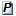
<style>
.page{position:relative;width:16px;height:16px;background:#ffffff}
.page>*{position:absolute;margin:0}
.t1{font:12px "Arial-BoldItalicMT";color:#000000}
</style>
<div class="page">
<p class="t1" style="left:3px;top:3px;width:9px;height:9px">P</p>
</div>
